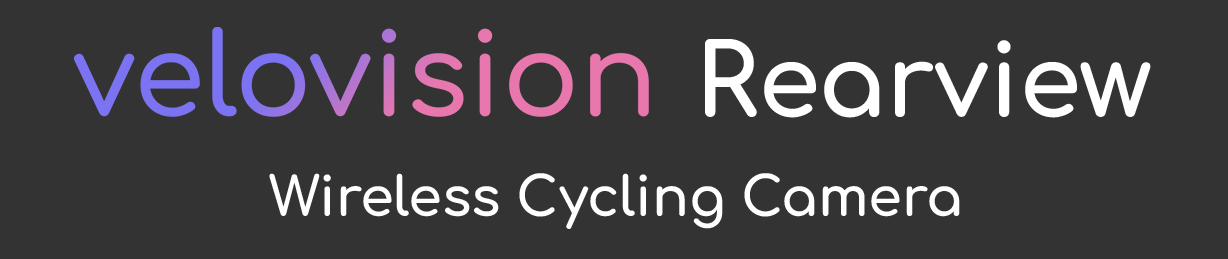
<style>
.page{position:relative;width:1228px;height:259px;background:#333333}
.page>*{position:absolute;margin:0}
.t1{font:100px "Comfortaa-Bold";color:#ffffff}
.t2{font:54.2px "Comfortaa-Bold";color:#ffffff}
</style>
<div class="page">
<p class="t1" style="left:705px;top:39px;width:446px;height:79px">Rearview</p>
<p class="t2" style="left:269px;top:173px;width:691px;height:56px">Wireless Cycling Camera</p>
</div>
